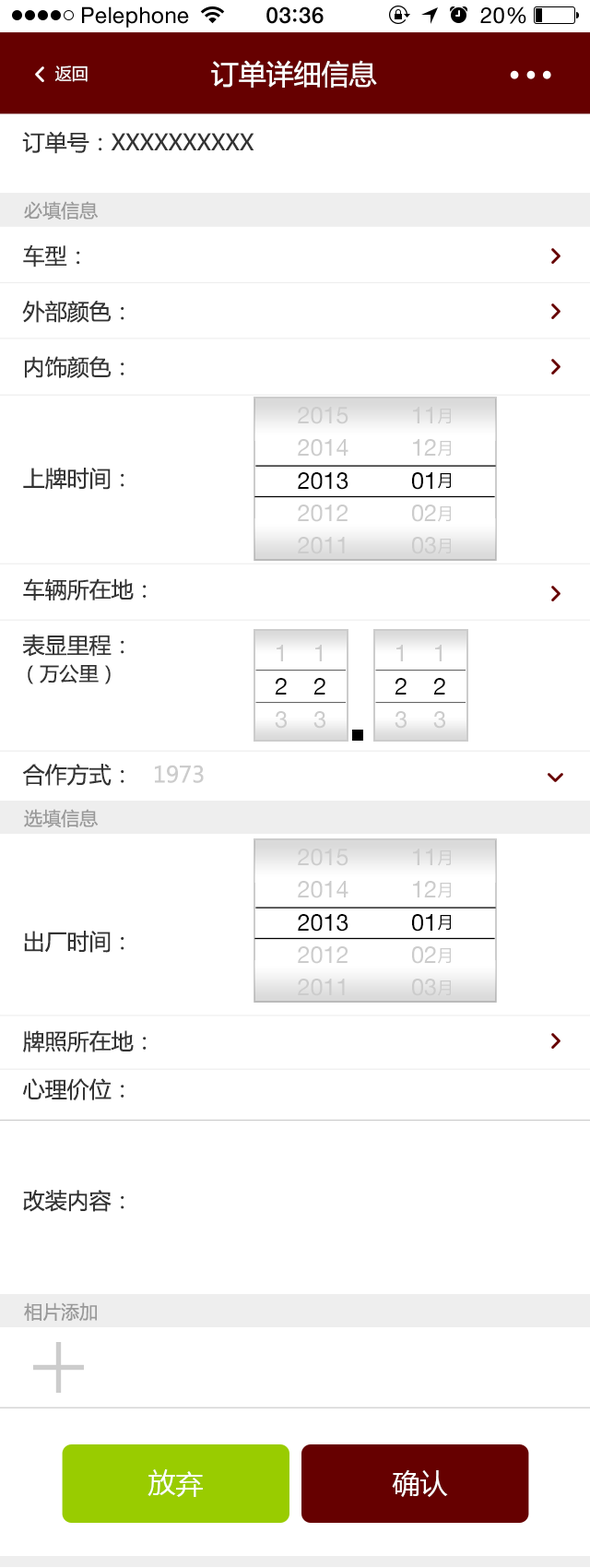
<style>
.page{position:relative;width:590px;height:1568px;background:#ffffff}
.page>*{position:absolute;margin:0}
.t1{font:22.1px "HelveticaNeue";letter-spacing:0.02em;color:#000000}
.t2{font:22.1px "HelveticaNeue-Medium";letter-spacing:0.03em;color:#000000}
.t3{font:16.6px "MicrosoftYaHei";color:#ffffff}
.t4{font:27.6px "MicrosoftYaHei";color:#ffffff}
.t5{font:22.1px "MicrosoftYaHei";color:#333333}
.t6{font:18.4px "MicrosoftYaHei";color:#999999}
.t7{font:22.1px/55.6px "MicrosoftYaHei";color:#333333}
.t8{font:22.1px/73.8px "MicrosoftYaHei";color:#333333}
.t9{font:22.1px/73.8px "MicrosoftYaHei";color:#cccccc}
.t10{font:22.1px/44.3px "MicrosoftYaHei";color:#333333}
.t11{font:22.1px/48px "MicrosoftYaHei";color:#333333}
.t12{font:23.3px/32.6px "HelveticaNeue";color:#cccccc}
.t13{font:23.3px/32.6px "HelveticaNeue";color:#000000}
.t14{font:16.3px/32.6px "MicrosoftYaHei";color:#cccccc}
.t15{font:16.3px/32.6px "MicrosoftYaHei";color:#000000}
.t16{font:23.4px/32.8px "HelveticaNeue";color:#cccccc}
.t17{font:23.4px/32.8px "HelveticaNeue";color:#000000}
.t18{font:19.6px "MicrosoftYaHei";color:#333333}
.t19{font:27.7px "MicrosoftYaHei";color:#ffffff}
</style>
<div class="page">
<p class="t1" style="left:82px;top:6px;width:107px;height:22px">Pelephone</p>
<p class="t2" style="left:267px;top:6px;width:57px;height:18px">03 36</p>
<p class="t1" style="left:481px;top:6px;width:46px;height:18px">20%</p>
<p class="t3" style="left:55px;top:65px;width:33px;height:17px">返回</p>
<p class="t4" style="left:211px;top:60px;width:166px;height:28px">订单详细信息</p>
<p class="t5" style="left:22px;top:131px;width:233px;height:23px">订单号：XXXXXXXXXX</p>
<p class="t6" style="left:24px;top:201px;width:75px;height:19px">必填信息</p>
<p class="t7" style="left:22px;top:244px;width:182px;height:968px">车型：<br>外部颜色：<br>内饰颜色：<br><br>上牌时间：<br><br>车辆所在地：<br>表显里程：<br><br><span class="t8">合作方式：   </span><span class="t9">1973<br><br><br></span>出厂时间：<br><br><span class="t10">牌照所在地：<br></span><span class="t11">心理价位：<br><br></span>改装内容：</p>
<p class="t12" style="left:298px;top:407px;width:51px;height:147px">2015<br>2014<br><span class="t13">2013<br></span>2012<br>2011</p>
<p class="t12" style="left:412px;top:407px;width:39px;height:147px">11<span class="t14">月<br></span>12<span class="t14">月<br></span><span class="t13">01</span><span class="t15">月<br></span>02<span class="t14">月<br></span>03<span class="t14">月</span></p>
<p class="t16" style="left:275px;top:645px;width:12px;height:84px">1<br><span class="t17">2<br></span>3</p>
<p class="t16" style="left:314px;top:645px;width:12px;height:84px">1<br><span class="t17">2<br></span>3</p>
<p class="t16" style="left:395px;top:645px;width:12px;height:84px">1<br><span class="t17">2<br></span>3</p>
<p class="t16" style="left:434px;top:645px;width:11px;height:84px">1<br><span class="t17">2<br></span>3</p>
<p class="t18" style="left:28px;top:664px;width:83px;height:20px">（万公里）</p>
<p class="t6" style="left:24px;top:809px;width:75px;height:19px">选填信息</p>
<p class="t12" style="left:298px;top:849px;width:51px;height:147px">2015<br>2014<br><span class="t13">2013<br></span>2012<br>2011</p>
<p class="t12" style="left:412px;top:849px;width:39px;height:147px">11<span class="t14">月<br></span>12<span class="t14">月<br></span><span class="t13">01</span><span class="t15">月<br></span>02<span class="t14">月<br></span>03<span class="t14">月</span></p>
<p class="t6" style="left:24px;top:1302px;width:73px;height:20px">相片添加</p>
<p class="t19" style="left:148px;top:1469px;width:55px;height:28px">放弃</p>
<p class="t19" style="left:392px;top:1470px;width:56px;height:27px">确认</p>
</div>
